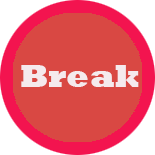
<style>
.page{position:relative;width:155px;height:155px;background:#d94843}
.page>*{position:absolute;margin:0}
.t1{font:33.3px "Rockwell-ExtraBold";color:#f5eaed}
</style>
<div class="page">
<p class="t1" style="left:21px;top:65px;width:118px;height:22px">Break</p>
</div>
